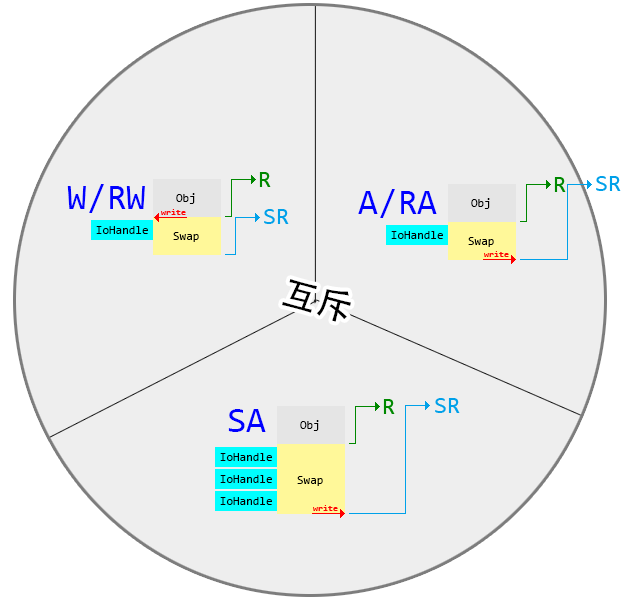
<style>
.page{position:relative;width:639px;height:600px;background:#eeeeee}
.page>*{position:absolute;margin:0}
.t1{font:36px "Consolas";color:#0000ff}
.t2{font:12px "Consolas";color:#000000}
.t3{font:36px "AdobeHeitiStd-Regular";color:#000000}
</style>
<div class="page">
<p class="t1" style="left:67px;top:184px;width:78px;height:29px">W/RW</p>
<p class="t2" style="left:176px;top:193px;width:19px;height:11px">Obj</p>
<p class="t1" style="left:358px;top:189px;width:79px;height:29px">A/RA</p>
<p class="t2" style="left:471px;top:198px;width:19px;height:11px">Obj</p>
<p class="t2" style="left:96px;top:226px;width:52px;height:8px">IoHandle</p>
<p class="t2" style="left:173px;top:232px;width:26px;height:10px">Swap</p>
<p class="t2" style="left:391px;top:231px;width:52px;height:8px">IoHandle</p>
<p class="t2" style="left:468px;top:237px;width:26px;height:10px">Swap</p>
<p class="t3" style="left:282px;top:279px;width:69px;height:43px;rotate:15deg">互斥</p>
<p class="t1" style="left:228px;top:409px;width:38px;height:23px">SA</p>
<p class="t2" style="left:300px;top:420px;width:19px;height:11px">Obj</p>
<p class="t2" style="left:220px;top:453px;width:52px;height:8px">IoHandle</p>
<p class="t2" style="left:220px;top:475px;width:52px;height:8px">IoHandle</p>
<p class="t2" style="left:297px;top:476px;width:26px;height:10px">Swap</p>
<p class="t2" style="left:220px;top:497px;width:52px;height:8px">IoHandle</p>
</div>
